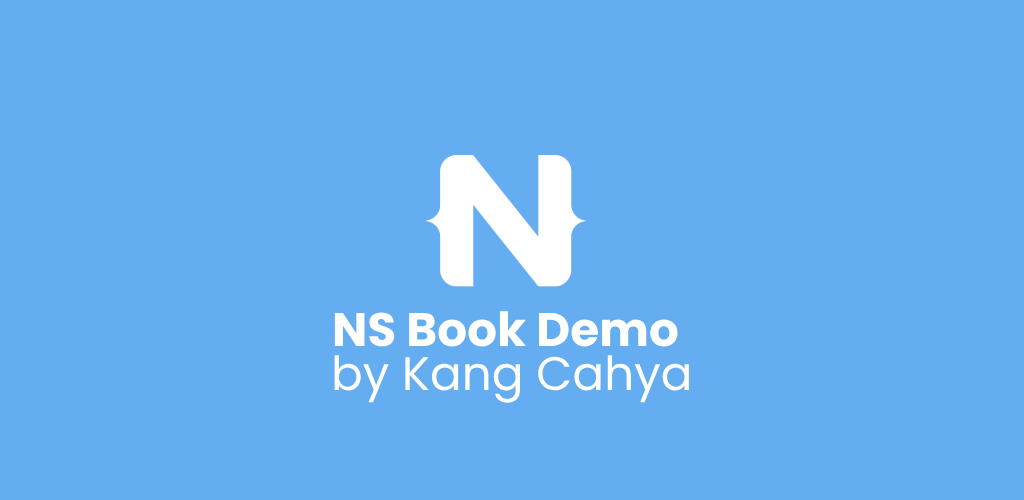
<style>
.page{position:relative;width:1024px;height:500px;background:#65adf1}
.page>*{position:absolute;margin:0}
.t1{font:47px "Poppins-Bold";color:#ffffff}
.t2{font:47px "Poppins-Regular";color:#ffffff}
</style>
<div class="page">
<p class="t1" style="left:334px;top:311px;width:344px;height:36px">NS Book Demo</p>
<p class="t2" style="left:334px;top:355px;width:355px;height:48px">by Kang Cahya</p>
</div>
